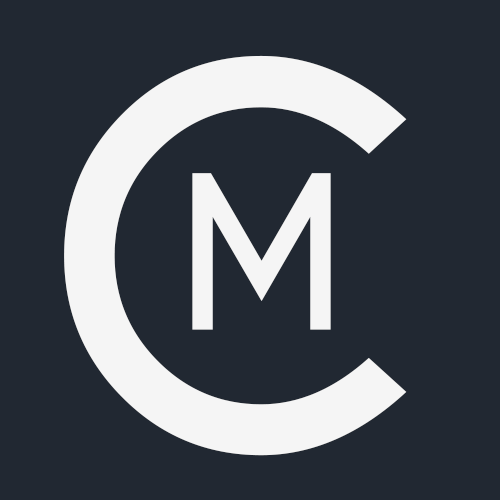
<style>
.page{position:relative;width:500px;height:500px;background:#212832}
.page>*{position:absolute;margin:0}
.t1{font:500px "CaviarDreams-Bold";color:#f5f5f5}
.t2{font:200px "CaviarDreams-Bold";color:#f5f5f5}
</style>
<div class="page">
<p class="t1" style="left:64px;top:55px;width:343px;height:401px">Cm</p>
<p class="t2" style="left:192px;top:173px;width:139px;height:157px">M</p>
</div>
